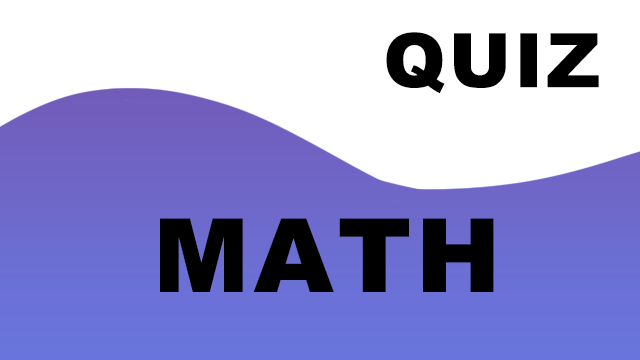
<style>
.page{position:relative;width:640px;height:360px;background:#ffffff}
.page>*{position:absolute;margin:0}
.t1{font:75px/102.5px "Arial-Black";letter-spacing:0.04em;color:#000000}
.t2{font:102.5px/102.5px "Arial-Black";letter-spacing:0.04em;color:#000000}
</style>
<div class="page">
<p class="t1" style="left:160px;top:32px;width:439px;height:260px;text-align:center">QUIZ<span class="t2"> <br><br>MATH</span></p>
</div>
